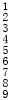
<style>
.page{position:relative;width:10px;height:100px;background:#ffffff}
.page>*{position:absolute;margin:0}
.t1{font:12px/11px "SimSun";letter-spacing:0.01em;color:#000000}
</style>
<div class="page">
<p class="t1" style="left:2px;top:2px;width:6px;height:96px">1<br>2<br>3<br>4<br>5<br>6<br>7<br>8<br>9</p>
</div>
